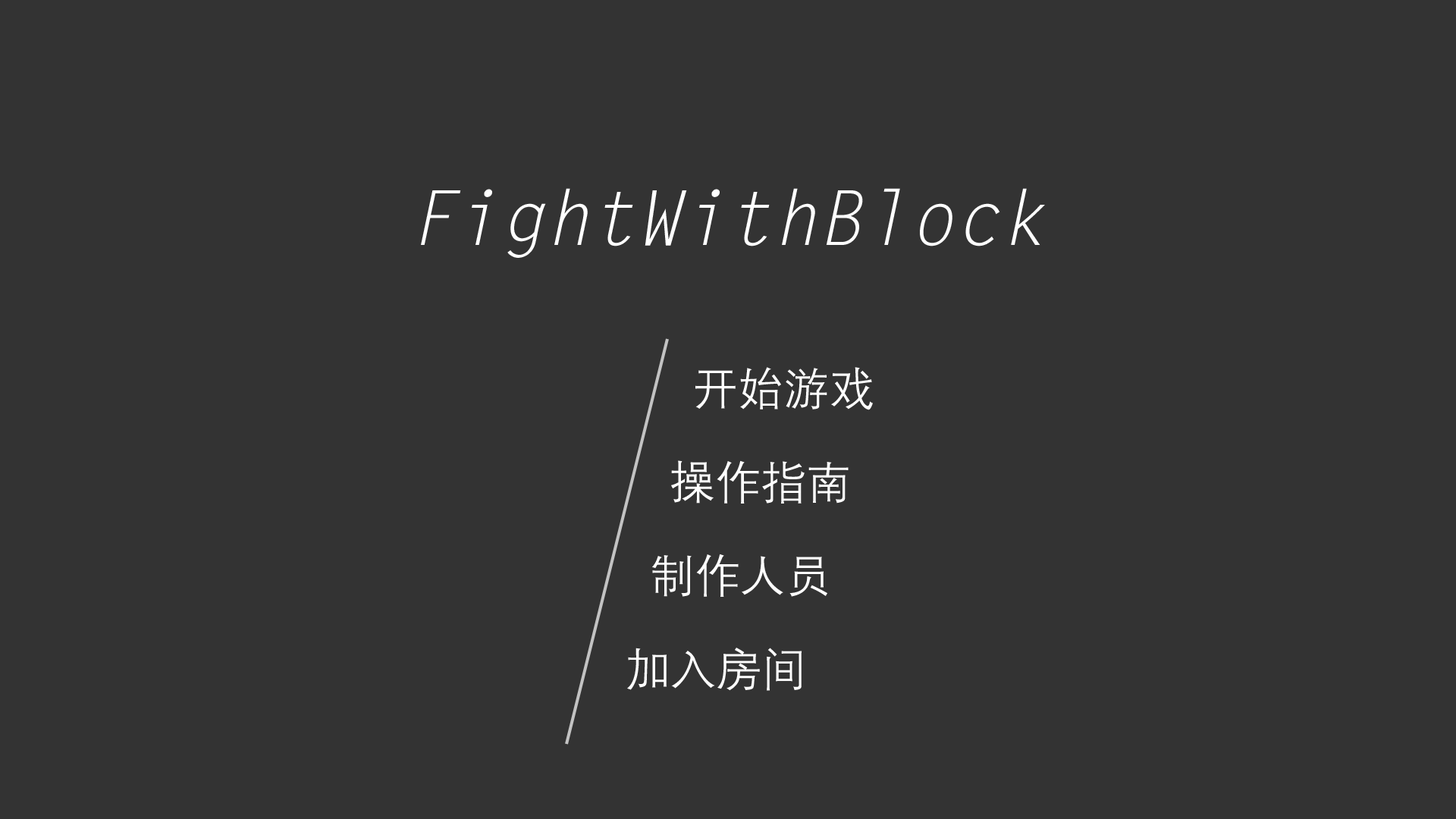
<style>
.page{position:relative;width:1456px;height:819px;background:#333333}
.page>*{position:absolute;margin:0}
.t1{font:75.8px "LetterGothicStd-Slanted";color:#ffffff}
.t2{font:45.5px "DengXian-Regular";color:#ffffff}
</style>
<div class="page">
<p class="t1" style="left:421px;top:188px;width:624px;height:70px">FightWithBlock</p>
<p class="t2" style="left:695px;top:367px;width:178px;height:43px">开始游戏</p>
<p class="t2" style="left:671px;top:460px;width:178px;height:44px">操作指南</p>
<p class="t2" style="left:652px;top:554px;width:175px;height:43px">制作人员</p>
<p class="t2" style="left:627px;top:648px;width:175px;height:43px">加入房间</p>
</div>
